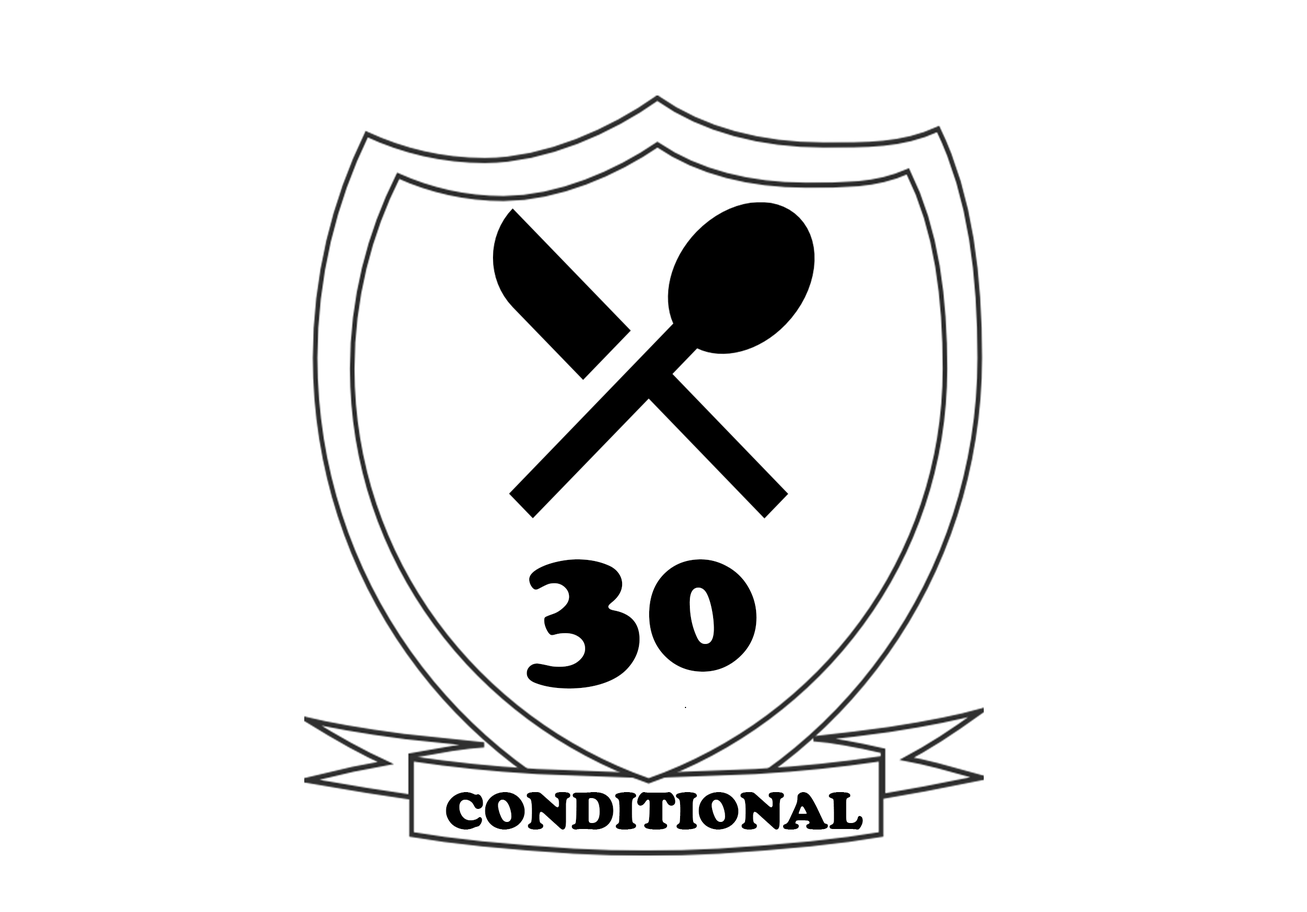
<style>
.page{position:relative;width:1307px;height:912px;background:#ffffff}
.page>*{position:absolute;margin:0}
.t1{font:195.3px "CooperBlack";color:#000000}
.t2{font:54.3px "CooperBlack";color:#000000}
</style>
<div class="page">
<p class="t1" style="left:527px;top:559px;width:230px;height:129px">30</p>
<p class="t2" style="left:446px;top:792px;width:417px;height:38px">CONDITIONAL</p>
</div>
